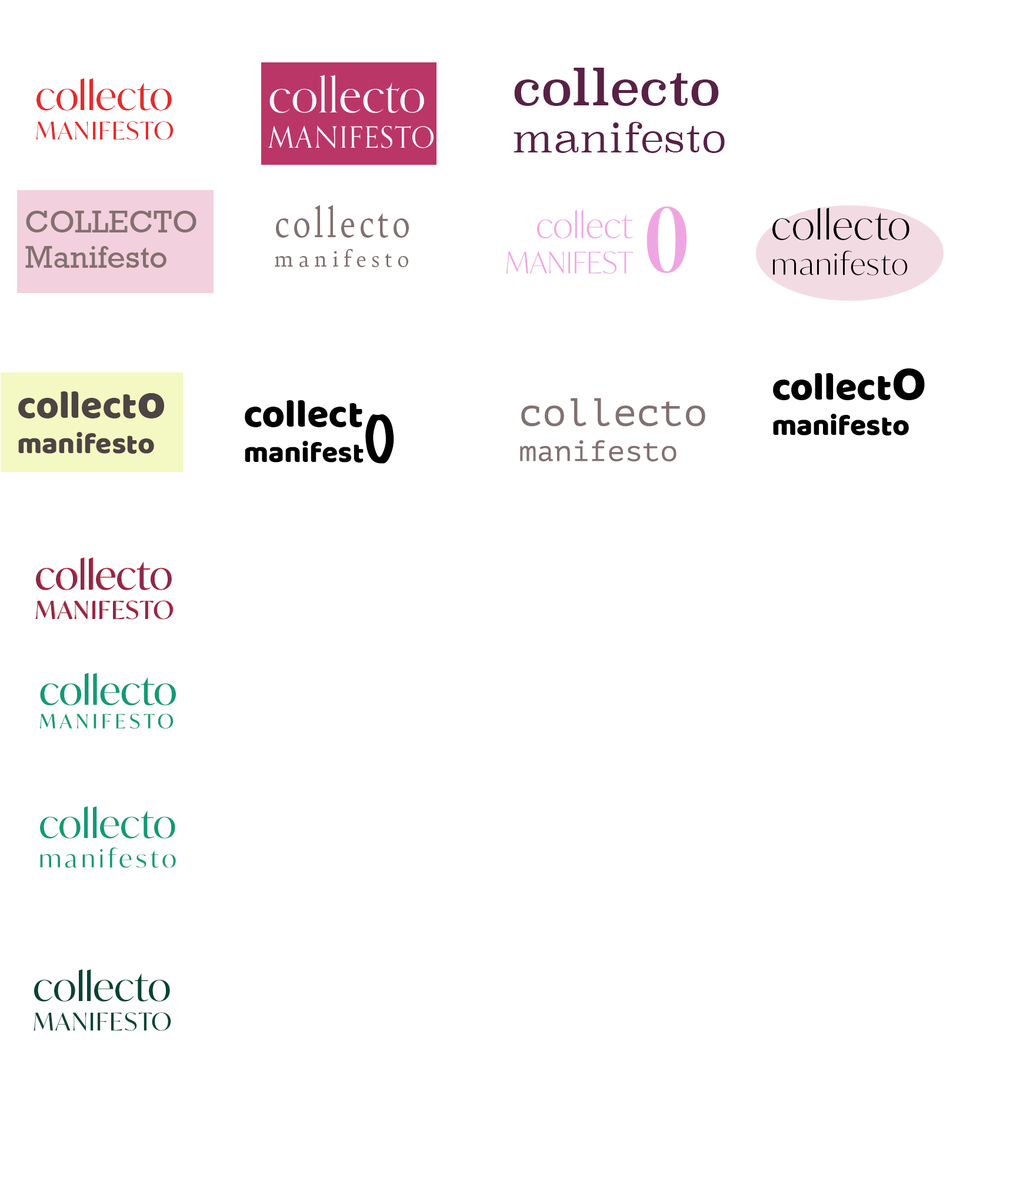
<style>
.page{position:relative;width:1013px;height:1177px;background:#ffffff}
.page>*{position:absolute;margin:0}
.t1{font:29.4px "OrpheusPro";letter-spacing:0.05em;color:#fff8fb}
.t2{font:49px "OrpheusPro";color:#fff8fb}
.t3{font:39.2px "Superclarendon-Light";letter-spacing:0.02em;color:#582145}
.t4{font:49px "Superclarendon-Regular";color:#582145}
.t5{font:24.5px "IvyMode-Regular";letter-spacing:0.05em;color:#e42b2b}
.t6{font:39.2px "IvyMode-Regular";color:#e42b2b}
.t7{font:24.5px "Bely-Regular";letter-spacing:0.2em;color:#837070}
.t8{font:44.6px "Bely-Regular";letter-spacing:0.075em;color:#837070;scale:0.85 1}
.t9{font:88.3px "IvyMode-Bold";letter-spacing:0.01em;color:#f0a5e3;scale:0.57 1}
.t10{font:29.4px "IvyMode-Light";letter-spacing:0.05em;color:#000000}
.t11{font:39.2px "IvyMode-Light";letter-spacing:0.025em;color:#000000}
.t12{font:29.4px "Rockwell-Regular";color:#837070}
.t13{font:29.4px "IvyMode-Thin";letter-spacing:0.01em;color:#f0a5e3}
.t14{font:34.3px "IvyMode-Thin";letter-spacing:0.01em;color:#f0a5e3}
.t15{font:29.4px "BalooThambi-Regular";color:#4d4444}
.t16{font:39.2px "BalooThambi-Regular";color:#4d4444}
.t17{font:49px "BalooThambi-Regular";color:#4d4444}
.t18{font:29.4px "BalooThambi-Regular";color:#000000}
.t19{font:39.2px "BalooThambi-Regular";color:#000000}
.t20{font:29.4px "PTMono-Regular";color:#837070}
.t21{font:39.2px "PTMono-Regular";color:#837070}
.t22{font:58.8px "MarkerFelt-Thin";color:#000000}
.t23{font:24.5px "IvyMode-Regular";letter-spacing:0.05em;color:#8b294c}
.t24{font:39.2px "IvyMode-Regular";color:#8b294c}
.t25{font:19.6px "IvyMode-Regular";letter-spacing:0.2em;color:#129a75}
.t26{font:39.2px "IvyMode-Regular";color:#129a75}
.t27{font:24.5px "IvyMode-Regular";letter-spacing:0.15em;color:#129a75}
.t28{font:24.5px "IvyMode-Regular";letter-spacing:0.05em;color:#064332}
.t29{font:39.2px "IvyMode-Regular";color:#064332}
</style>
<div class="page">
<p class="t1" style="left:268px;top:75px;width:166px;height:73px"><span class="t2">collecto<br></span>MANIFESTO</p>
<p class="t3" style="left:514px;top:68px;width:211px;height:85px"><span class="t4">collecto<br></span>manifesto</p>
<p class="t5" style="left:36px;top:78px;width:138px;height:62px"><span class="t6">collecto<br></span>MANIFESTO</p>
<p class="t7" style="left:275px;top:205px;width:134px;height:62px"><span class="t8">collecto<br></span>manifesto</p>
<p class="t9" style="left:647px;top:206px;width:40px;height:67px">O</p>
<p class="t10" style="left:773px;top:208px;width:137px;height:67px"><span class="t11">collecto<br></span>manifesto</p>
<p class="t12" style="left:25px;top:211px;width:172px;height:57px">COLLECTO<br>Manifesto</p>
<p class="t13" style="left:506px;top:210px;width:128px;height:64px;text-align:right"><span class="t14">collect<br></span>MANIFEST</p>
<p class="t15" style="left:18px;top:391px;width:147px;height:63px"><span class="t16">collect</span><span class="t17">o<br></span>manifesto</p>
<p class="t18" style="left:245px;top:400px;width:119px;height:62px"><span class="t19">collect<br></span>manifest</p>
<p class="t20" style="left:520px;top:398px;width:186px;height:64px"><span class="t21">collecto<br></span>manifesto</p>
<p class="t22" style="left:365px;top:414px;width:29px;height:50px">O</p>
<p class="t23" style="left:35px;top:558px;width:138px;height:62px"><span class="t24">collecto<br></span>MANIFESTO</p>
<p class="t23" style="left:36px;top:557px;width:138px;height:62px"><span class="t24">collecto<br></span>MANIFESTO</p>
<p class="t25" style="left:39px;top:673px;width:137px;height:55px"><span class="t26">collecto<br></span>MANIFESTO</p>
<p class="t27" style="left:40px;top:806px;width:136px;height:62px"><span class="t26">collecto<br></span>manifesto</p>
<p class="t28" style="left:34px;top:969px;width:137px;height:62px"><span class="t29">collecto<br></span>MANIFESTO</p>
</div>
